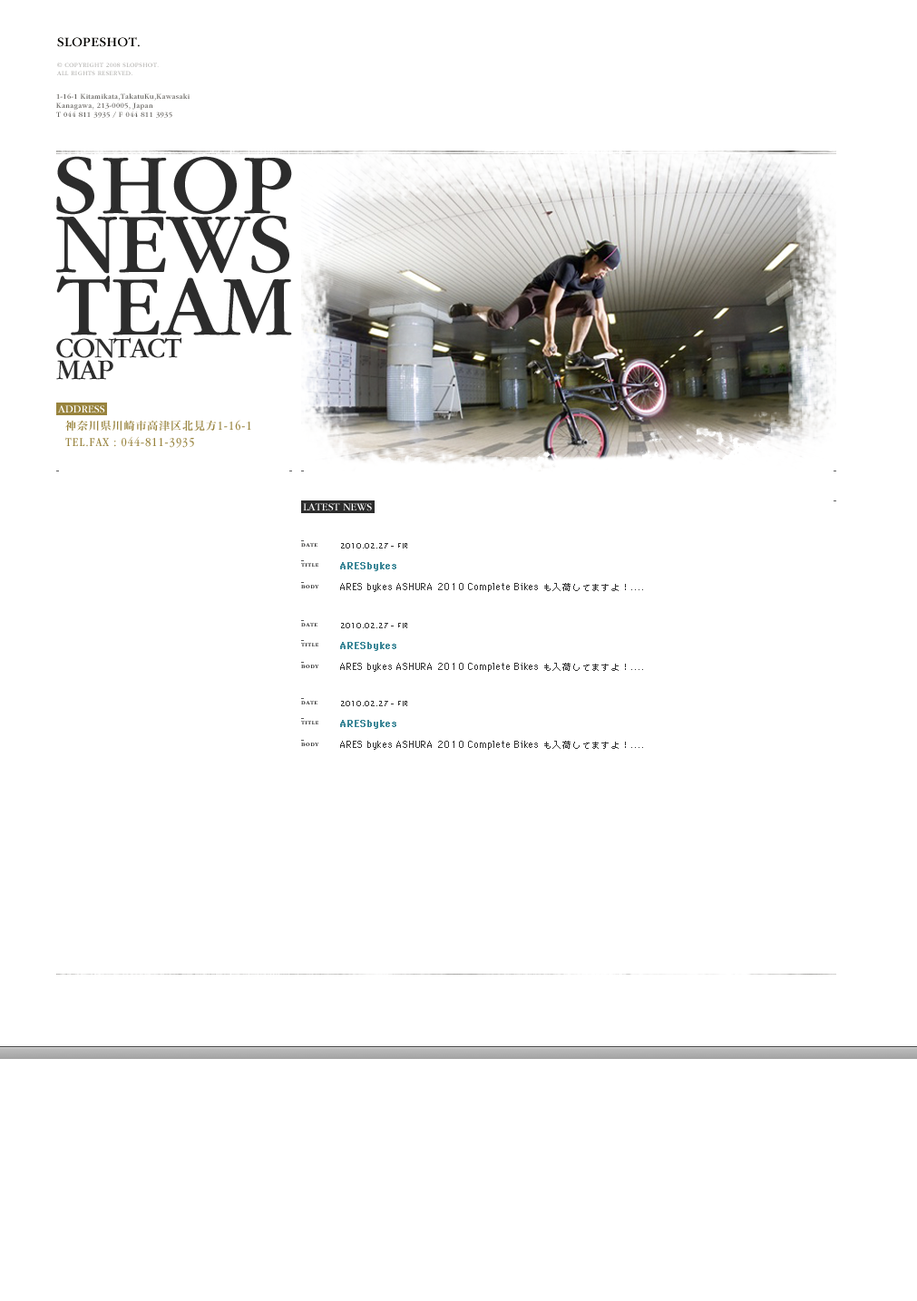
<style>
.page{position:relative;width:917px;height:1301px;background:#ffffff}
.page>*{position:absolute;margin:0}
.t1{font:88.5px "ITCGaramondStd-Bk";letter-spacing:0.022em;color:#2c2c2c}
.t2{font:88.5px "ITCGaramondStd-Bk";letter-spacing:-0.019em;color:#2c2c2c}
.t3{font:88.5px "ITCGaramondStd-Bk";letter-spacing:-0.006em;color:#2c2c2c}
.t4{font:29px "ITCGaramondStd-Bk";letter-spacing:-0.05em;color:#2c2c2c}
.t5{font:10.9px "ITCGaramondStd-Bk";letter-spacing:-0.019em;color:#ffffff}
.t6{font:12.7px/16.3px "ITCGaramondStd-BkNarrow";letter-spacing:0.075em;color:#98833d}
.t7{font:10.9px/16.3px "HiraMinProN-W6";letter-spacing:0.075em;color:#98833d}
.t8{font:5.4px "ITCGaramondStd-Bd";letter-spacing:0.075em;color:#363636}
.t9{font:7.3px "Osaka";letter-spacing:0.075em;color:#363636}
.t10{font:9.1px "Osaka";letter-spacing:0.075em;color:#3d8898;font-weight:bold}
.t11{font:9.1px "Osaka";letter-spacing:0.075em;color:#363636}
</style>
<div class="page">
<p class="t1" style="left:56px;top:156px;width:236px;height:59px">SHOP</p>
<p class="t2" style="left:56px;top:215px;width:233px;height:59px">NEWS</p>
<p class="t3" style="left:56px;top:276px;width:236px;height:59px">TEAM</p>
<p class="t4" style="left:56px;top:337px;width:126px;height:21px">CONTACT</p>
<p class="t4" style="left:56px;top:360px;width:57px;height:20px">MAP</p>
<p class="t5" style="left:57px;top:405px;width:48px;height:8px">ADDRESS</p>
<p class="t6" style="left:65px;top:420px;width:186px;height:28px"><span class="t7">神奈川県川崎市高津区北見方</span>1-16-1<br>TEL.FAX : 044-811-3935</p>
<p class="t5" style="left:303px;top:503px;width:69px;height:8px">LATEST NEWS</p>
<p class="t8" style="left:301px;top:542px;width:16px;height:5px">DATE</p>
<p class="t9" style="left:341px;top:543px;width:66px;height:5px">2010.02.27 - FIR</p>
<p class="t8" style="left:301px;top:562px;width:17px;height:5px">TITLE</p>
<p class="t10" style="left:340px;top:562px;width:56px;height:9px">ARESbykes</p>
<p class="t8" style="left:301px;top:585px;width:18px;height:3px">BODY</p>
<p class="t11" style="left:340px;top:583px;width:303px;height:9px">ARES bykes ASHURA 2010 Complete Bikes も入荷してますよ！....</p>
<p class="t8" style="left:301px;top:622px;width:16px;height:4px">DATE</p>
<p class="t9" style="left:341px;top:623px;width:66px;height:5px">2010.02.27 - FIR</p>
<p class="t8" style="left:301px;top:642px;width:17px;height:4px">TITLE</p>
<p class="t10" style="left:340px;top:642px;width:56px;height:9px">ARESbykes</p>
<p class="t8" style="left:301px;top:665px;width:18px;height:3px">BODY</p>
<p class="t11" style="left:340px;top:663px;width:303px;height:9px">ARES bykes ASHURA 2010 Complete Bikes も入荷してますよ！....</p>
<p class="t8" style="left:301px;top:700px;width:16px;height:4px">DATE</p>
<p class="t9" style="left:341px;top:701px;width:66px;height:5px">2010.02.27 - FIR</p>
<p class="t8" style="left:301px;top:720px;width:17px;height:4px">TITLE</p>
<p class="t10" style="left:340px;top:720px;width:56px;height:9px">ARESbykes</p>
<p class="t8" style="left:301px;top:743px;width:18px;height:3px">BODY</p>
<p class="t11" style="left:340px;top:741px;width:303px;height:9px">ARES bykes ASHURA 2010 Complete Bikes も入荷してますよ！....</p>
</div>
